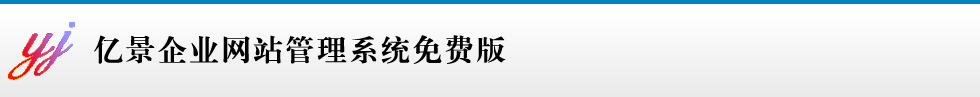
<style>
.page{position:relative;width:980px;height:97px}
.page>*{position:absolute;margin:0}
.t1{font:29px "FZXBSJW--GB1-0";letter-spacing:0.1em;color:#000000}
</style>
<div class="page">
<p class="t1" style="left:94px;top:35px;width:412px;height:29px">亿景企业网站管理系统免费版</p>
</div>
